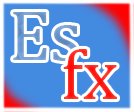
<style>
.page{position:relative;width:134px;height:112px;background:#438ae1}
.page>*{position:absolute;margin:0}
.t1{font:72px "Cambria";color:#739bcf}
.t2{font:72px "Cambria";color:#ff241b}
</style>
<div class="page">
<p class="t1" style="left:13px;top:12px;width:65px;height:49px">Es</p>
<p class="t2" style="left:63px;top:49px;width:54px;height:50px">fx</p>
</div>
